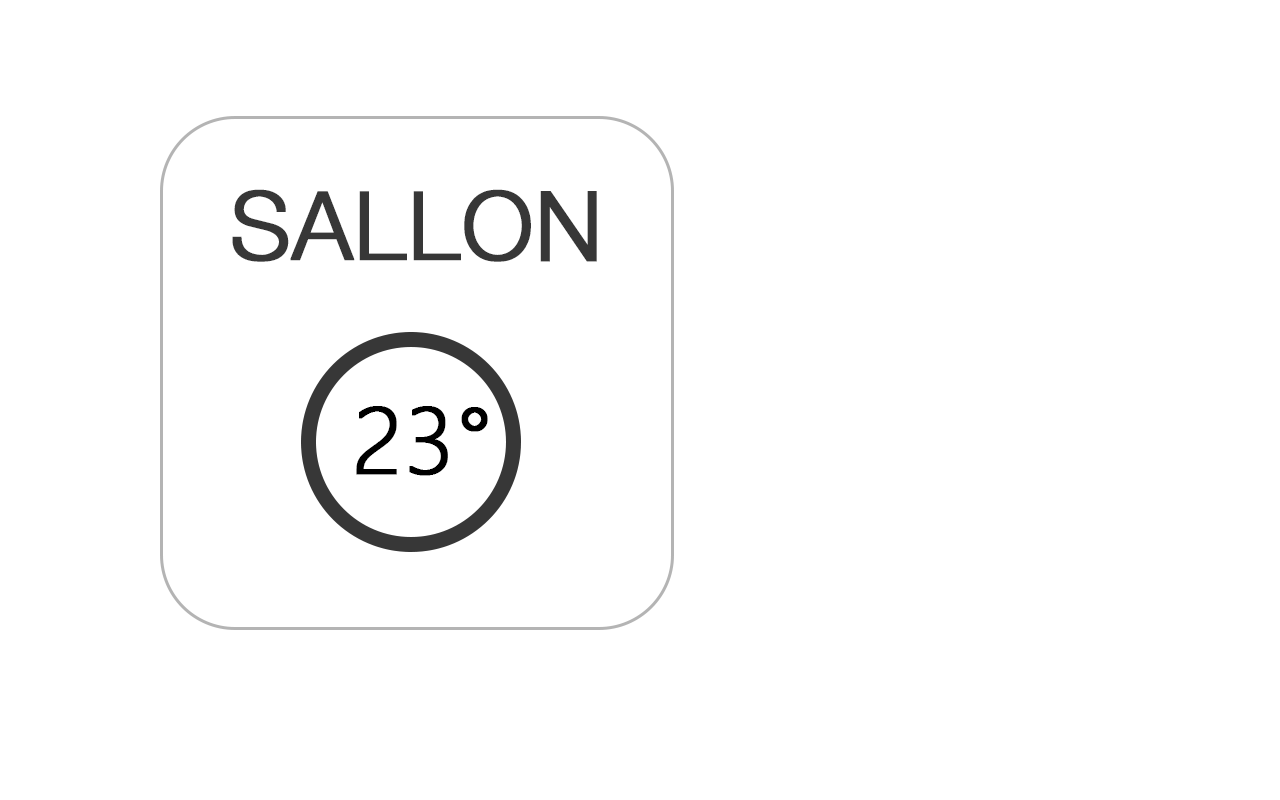
<style>
.page{position:relative;width:1280px;height:800px;background:#ffffff}
.page>*{position:absolute;margin:0}
.t1{font:95px "HelveticaNeueLight";color:#373737;font-weight:bold}
.t2{font:95px "SegoeUI-Light";color:#000000;font-weight:bold}
</style>
<div class="page">
<p class="t1" style="left:232px;top:189px;width:365px;height:73px">SALLON</p>
<p class="t2" style="left:356px;top:406px;width:132px;height:70px">23°</p>
</div>
